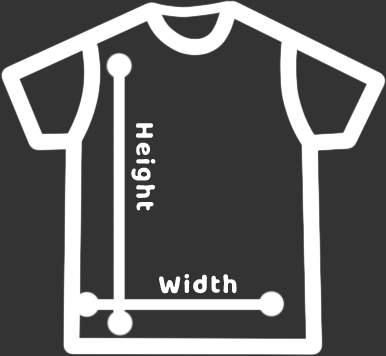
<style>
.page{position:relative;width:386px;height:356px;background:#333333}
.page>*{position:absolute;margin:0}
.t1{font:24.2px "MilkyNiceClean";letter-spacing:0.1em;color:#ffffff}
</style>
<div class="page">
<p class="t1" style="left:131px;top:123px;width:25px;height:88px;rotate:90deg">Height</p>
<p class="t1" style="left:159px;top:274px;width:78px;height:20px">Width</p>
</div>
